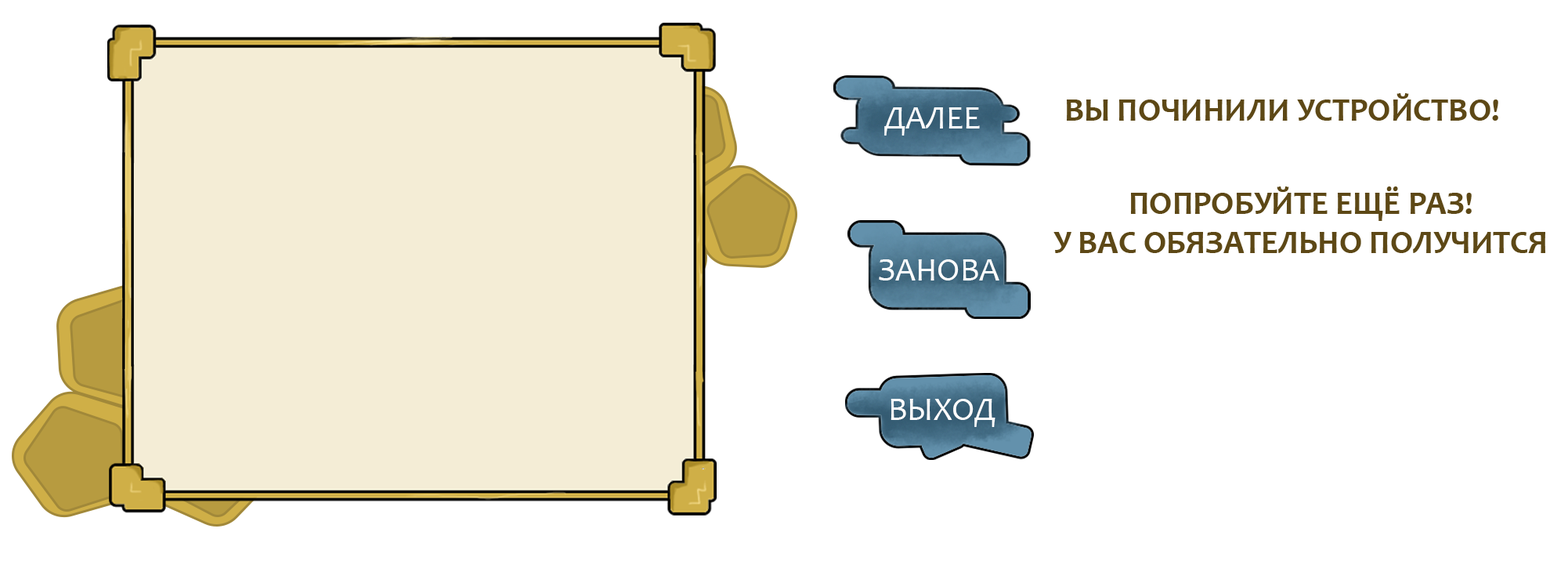
<style>
.page{position:relative;width:1568px;height:561px;background:#ffffff}
.page>*{position:absolute;margin:0}
.t1{font:33px "Candara-Bold";color:#5d4816}
</style>
<div class="page">
<p class="t1" style="left:1067px;top:93px;width:431px;height:28px">ВЫ ПОЧИНИЛИ УСТРОЙСТВО!</p>
<p class="t1" style="left:1053px;top:186px;width:492px;height:67px;text-align:center">ПОПРОБУЙТЕ ЕЩЁ РАЗ!<br>У ВАС ОБЯЗАТЕЛЬНО ПОЛУЧИТСЯ</p>
</div>
